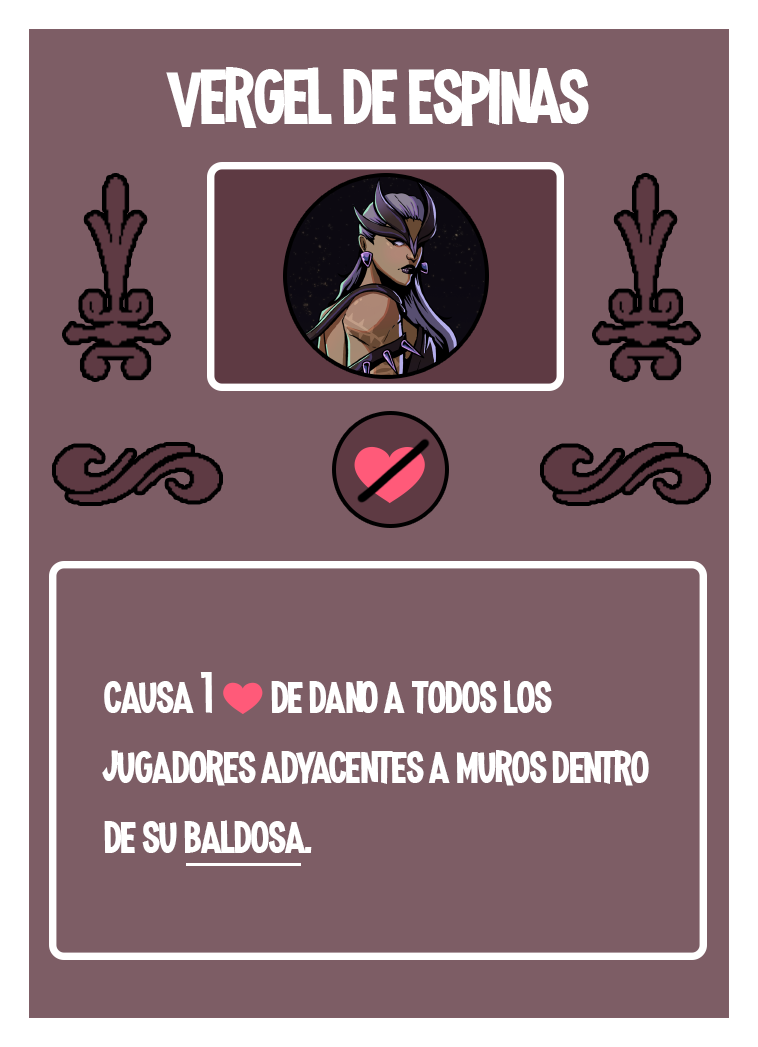
<style>
.page{position:relative;width:758px;height:1047px;background:#7d5d65}
.page>*{position:absolute;margin:0}
.t1{font:100px "MadnessHyperactive";color:#ffffff}
.t2{font:58.3px "MadnessHyperactive";color:#ffffff}
.t3{font:41.7px "EmojiOneColor";color:#ffffff}
</style>
<div class="page">
<p class="t1" style="left:166px;top:67px;width:423px;height:61px">vergel de espinas</p>
<p class="t2" style="left:102px;top:672px;width:547px;height:181px">causa 1 <span class="t3">❤️ </span>de dano a todos los jugadores adyacentes a muros dentro de su baldosa.</p>
</div>
